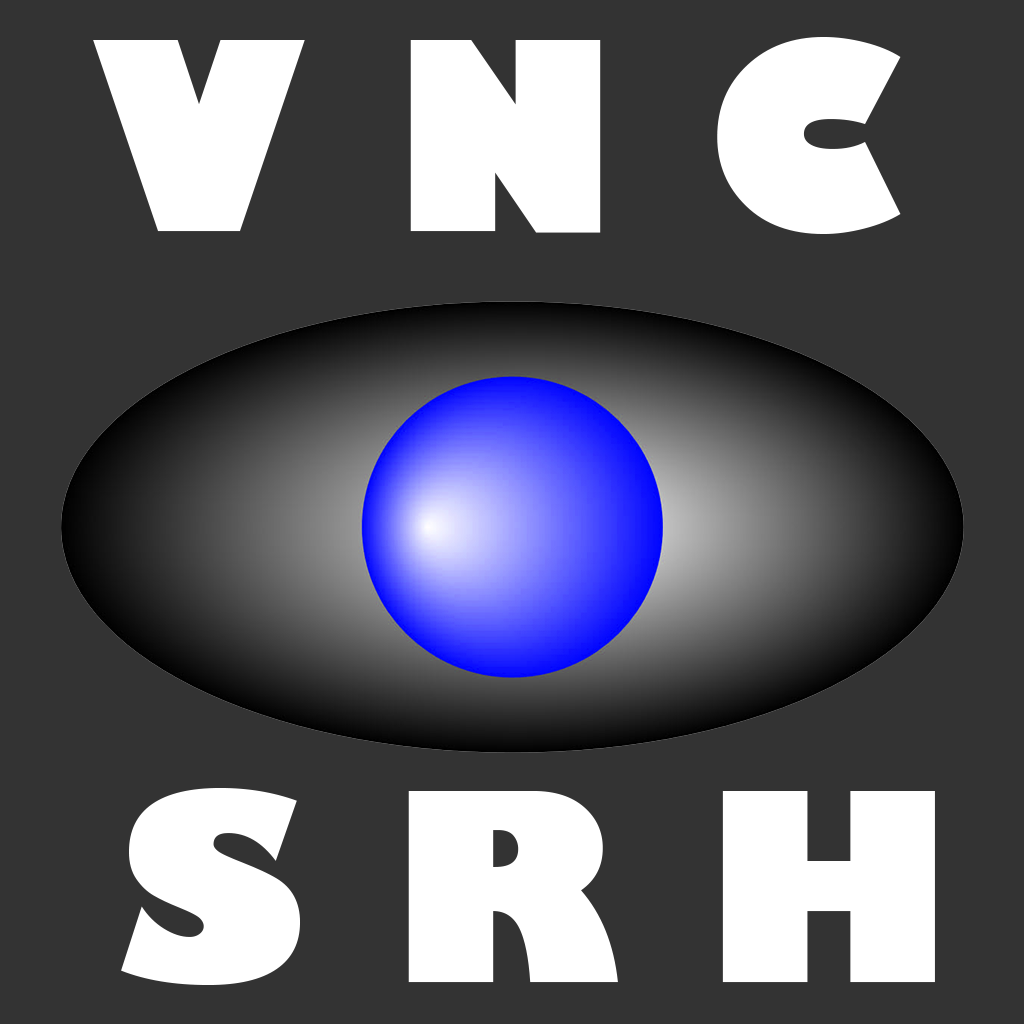
<style>
.page{position:relative;width:1024px;height:1024px;background:#333333}
.page>*{position:absolute;margin:0}
.t1{font:256px "GillSans-UltraBold";color:#ffffff}
</style>
<div class="page">
<p class="t1" style="left:93px;top:37px;width:808px;height:197px">V N C</p>
<p class="t1" style="left:121px;top:788px;width:814px;height:197px">S R H</p>
</div>
